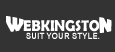
<style>
.page{position:relative;width:115px;height:52px;background:#333333}
.page>*{position:absolute;margin:0}
.t1{font:18.6px "BerlinSansFB-Bold";color:#ffffff;text-transform:uppercase;scale:0.91 1}
.t2{font:15.8px "BerlinSansFBDemi-Bold";color:#ffffff;text-transform:uppercase;scale:0.91 1}
.t3{font:8.8px "Arial-BoldMT";color:#ffffff;text-transform:uppercase;scale:0.91 1}
</style>
<div class="page">
<p class="t1" style="left:6px;top:16px;width:18px;height:16px">w</p>
<p class="t1" style="left:99px;top:17px;width:13px;height:16px">n</p>
<p class="t2" style="left:23px;top:20px;width:87px;height:12px">ebkingston</p>
<p class="t3" style="left:26px;top:32px;width:74px;height:7px">suit your style.</p>
</div>
